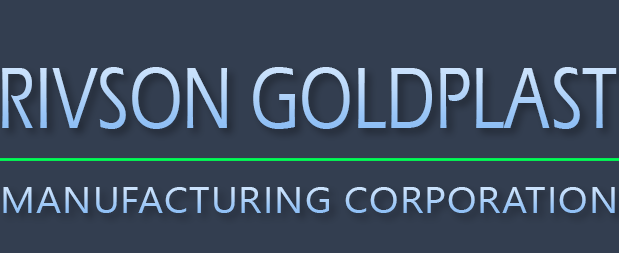
<style>
.page{position:relative;width:619px;height:253px;background:#333e50}
.page>*{position:absolute;margin:0}
.t1{font:21.5px "ErasITC-Medium";letter-spacing:0.01em;scale:0.73 1}
.t2{font:9px "NirmalaUI";letter-spacing:0.03em;scale:1.04 1}
</style>
<div class="page">
<p class="t1" style="left:2px;top:67px;width:615px;height:62px">RIVSON GOLDPLAST</p>
<p class="t2" style="left:3px;top:187px;width:612px;height:26px">MANUFACTURING CORPORATION</p>
</div>
